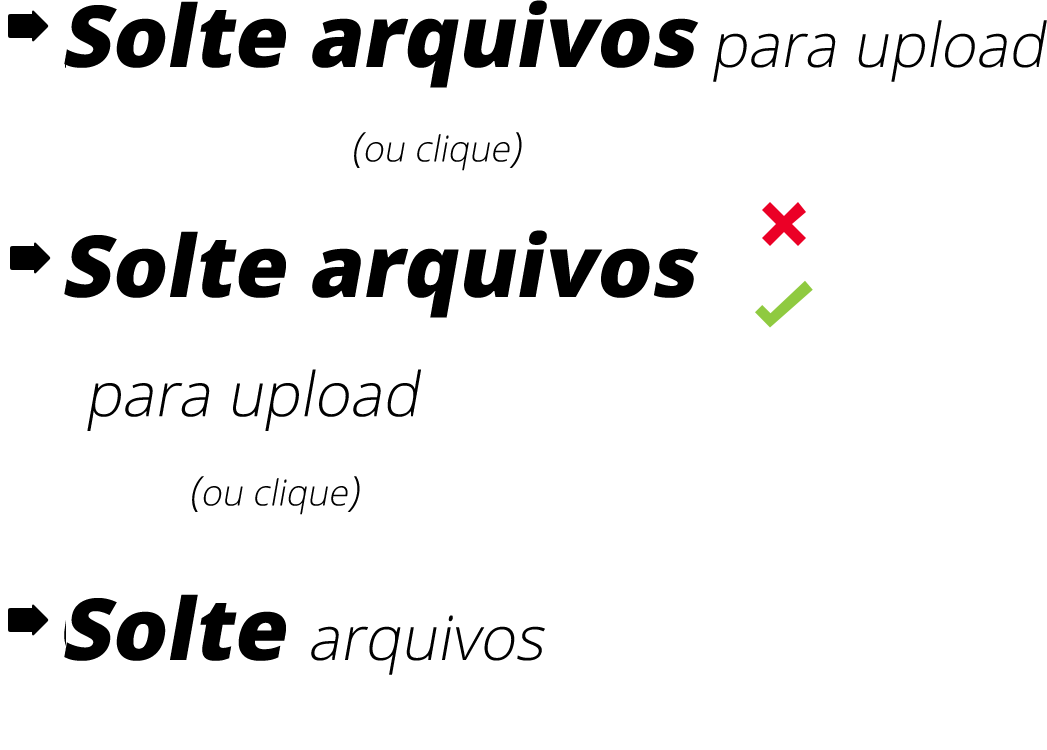
<style>
.page{position:relative;width:1047px;height:750px;background:#ffffff}
.page>*{position:absolute;margin:0}
.t1{font:85.9px "OpenSans-Extrabold";color:#000000;font-style:italic}
.t2{font:61.5px "OpenSans-Light";color:#000000;font-style:italic}
.t3{font:35.9px "OpenSans-Light";color:#000000;font-style:italic}
.t4{font:41.1px "OpenSans-Light";color:#000000;font-style:italic}
</style>
<div class="page">
<p class="t1" style="left:64px;top:0px;width:983px;height:88px">Solte arquivos<span class="t2"> para upload</span></p>
<p class="t3" style="left:354px;top:132px;width:168px;height:39px"><span class="t4">(</span>ou clique<span class="t4">)</span></p>
<p class="t1" style="left:64px;top:230px;width:635px;height:88px">Solte arquivos</p>
<p class="t2" style="left:87px;top:369px;width:334px;height:62px">para upload</p>
<p class="t3" style="left:192px;top:476px;width:168px;height:39px"><span class="t4">(</span>ou clique<span class="t4">)</span></p>
<p class="t2" style="left:64px;top:594px;width:481px;height:81px"><span class="t1">Solte </span>arquivos</p>
</div>
